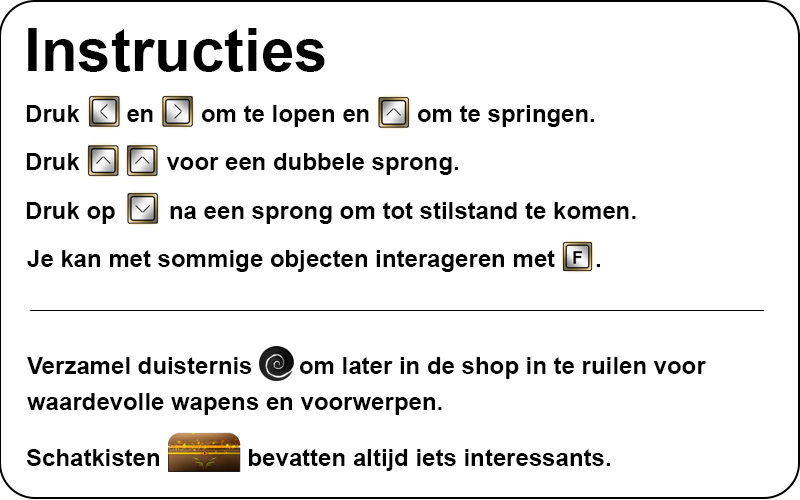
<style>
.page{position:relative;width:800px;height:500px;background:#ffffff}
.page>*{position:absolute;margin:0}
.t1{font:60px "Arial-BoldMT";color:#000000}
.t2{font:24px "Arial-BoldMT";color:#000000}
.t3{font:24px/36px "Arial-BoldMT";color:#000000}
</style>
<div class="page">
<p class="t1" style="left:28px;top:28px;width:297px;height:44px">Instructies</p>
<p class="t2" style="left:26px;top:105px;width:568px;height:22px">Druk       en       om te lopen en       om te springen.</p>
<p class="t2" style="left:26px;top:153px;width:432px;height:22px">Druk             voor een dubbele sprong.</p>
<p class="t2" style="left:26px;top:202px;width:610px;height:22px">Druk op        na een sprong om tot stilstand te komen.</p>
<p class="t2" style="left:27px;top:250px;width:573px;height:22px">Je kan met sommige objecten interageren met      .</p>
<p class="t3" style="left:27px;top:357px;width:679px;height:58px">Verzamel duisternis    om later in de shop in te ruilen voor <br>waardevolle wapens en voorwerpen.</p>
<p class="t2" style="left:26px;top:449px;width:584px;height:22px">Schatkisten             bevatten altijd iets interessants.</p>
</div>
